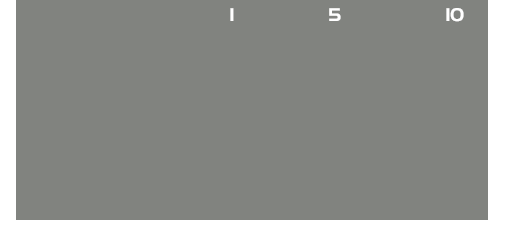
<style>
.page{position:relative;width:512px;height:236px;background:#81837f}
.page>*{position:absolute;margin:0}
.t1{font:17.8px "HandelGothicBT-Regular";color:#ffffff}
</style>
<div class="page">
<p class="t1" style="left:230px;top:8px;width:4px;height:13px">1</p>
<p class="t1" style="left:329px;top:8px;width:12px;height:13px">5</p>
<p class="t1" style="left:446px;top:8px;width:18px;height:14px">10</p>
</div>
